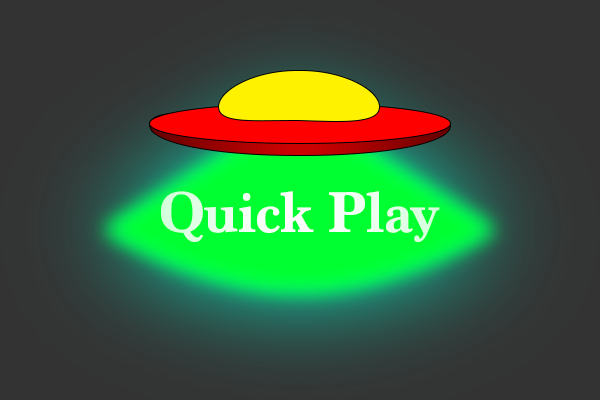
<style>
.page{position:relative;width:600px;height:400px}
.page>*{position:absolute;margin:0}
.t1{font:60px "Marion-Bold";letter-spacing:-0.03em;color:#ffffff}
</style>
<div class="page">
<p class="t1" style="left:161px;top:191px;width:279px;height:51px">Quick Play</p>
</div>
